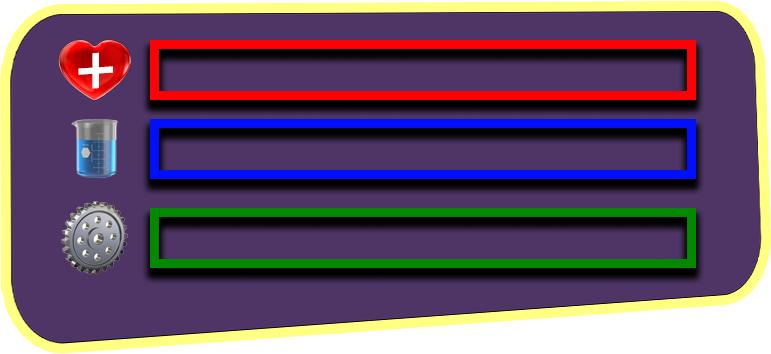
<style>
.page{position:relative;width:771px;height:354px;background:#4e3565}
.page>*{position:absolute;margin:0}
.t1{font:66.3px "MyriadPro-Bold";letter-spacing:0.01em;color:#ffffff}
</style>
<div class="page">
<p class="t1" style="left:78px;top:52px;width:35px;height:37px;rotate:-4deg">+</p>
</div>
